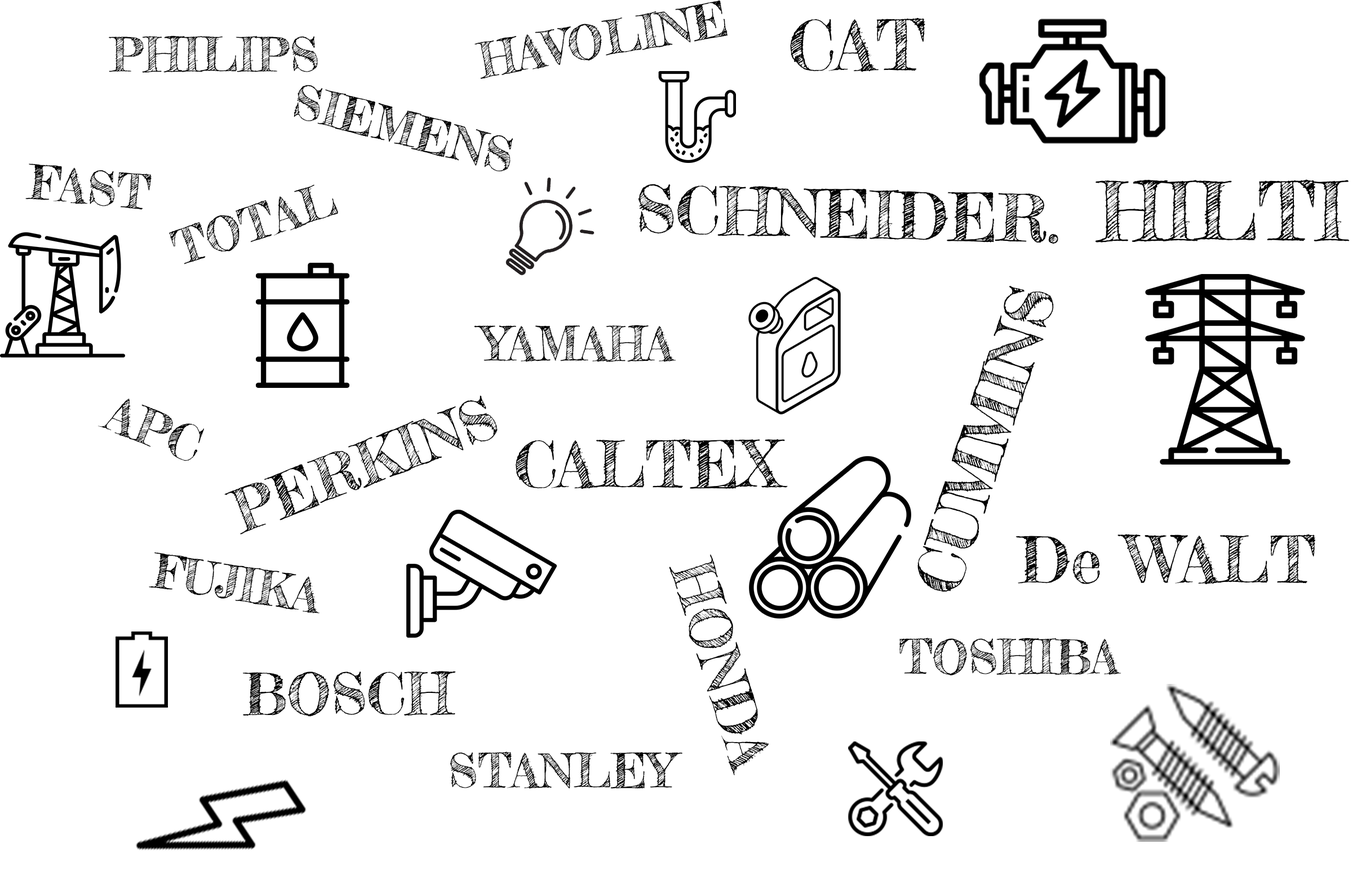
<style>
.page{position:relative;width:1357px;height:879px;background:#ffffff}
.page>*{position:absolute;margin:0}
.t1{font:47px "FrederickatheGreat-Regular";color:#000000}
.t2{font:68.5px "FrederickatheGreat-Regular";color:#000000}
.t3{font:65px "FrederickatheGreat-Regular";color:#000000}
.t4{font:80.1px "FrederickatheGreat-Regular";color:#000000}
.t5{font:64.5px "FrederickatheGreat-Regular";color:#000000}
.t6{font:49.3px "FrederickatheGreat-Regular";color:#000000}
.t7{font:58.7px "FrederickatheGreat-Regular";color:#000000}
.t8{font:63.4px "FrederickatheGreat-Regular";color:#000000}
.t9{font:63.8px "FrederickatheGreat-Regular";color:#000000}
.t10{font:57.4px "FrederickatheGreat-Regular";color:#000000}
.t11{font:57px "FrederickatheGreat-Regular";color:#000000}
</style>
<div class="page">
<p class="t1" style="left:475px;top:0px;width:253px;height:79px;rotate:-10deg">HAVOLINE</p>
<p class="t2" style="left:790px;top:17px;width:135px;height:55px">CAT</p>
<p class="t1" style="left:109px;top:36px;width:209px;height:37px">PHILIPS</p>
<p class="t1" style="left:294px;top:85px;width:219px;height:86px;rotate:15deg">SIEMENS</p>
<p class="t1" style="left:25px;top:163px;width:127px;height:47px;rotate:5deg">FAST</p>
<p class="t1" style="left:169px;top:184px;width:169px;height:80px;rotate:-18deg">TOTAL</p>
<p class="t3" style="left:638px;top:184px;width:420px;height:60px;rotate:1deg">SCHNEIDER.</p>
<p class="t4" style="left:1095px;top:179px;width:255px;height:63px">HILTI</p>
<p class="t5" style="left:918px;top:286px;width:136px;height:306px;rotate:-72deg">CUMMINS</p>
<p class="t1" style="left:474px;top:325px;width:202px;height:37px">YAMAHA</p>
<p class="t6" style="left:98px;top:398px;width:106px;height:63px;rotate:22deg">APC</p>
<p class="t7" style="left:224px;top:395px;width:274px;height:139px;rotate:-21deg">PERKINS</p>
<p class="t8" style="left:515px;top:438px;width:273px;height:51px">CALTEX</p>
<p class="t9" style="left:1016px;top:534px;width:300px;height:50px">De WALT</p>
<p class="t1" style="left:149px;top:552px;width:171px;height:61px;rotate:9deg">FUJIKA</p>
<p class="t10" style="left:669px;top:554px;width:100px;height:221px;rotate:73deg">HONDA</p>
<p class="t1" style="left:899px;top:637px;width:223px;height:38px">TOSHIBA</p>
<p class="t11" style="left:242px;top:671px;width:214px;height:45px">BOSCH</p>
<p class="t1" style="left:450px;top:751px;width:233px;height:37px">STANLEY</p>
</div>
